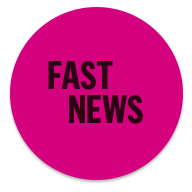
<style>
.page{position:relative;width:192px;height:192px;background:#d5007e}
.page>*{position:absolute;margin:0}
.t1{font:38px/34px "FlamaCondensed-Bold";color:#2c0114;text-transform:uppercase}
</style>
<div class="page">
<p class="t1" style="left:48px;top:61px;width:95px;height:63px">Fast<br>News</p>
</div>
